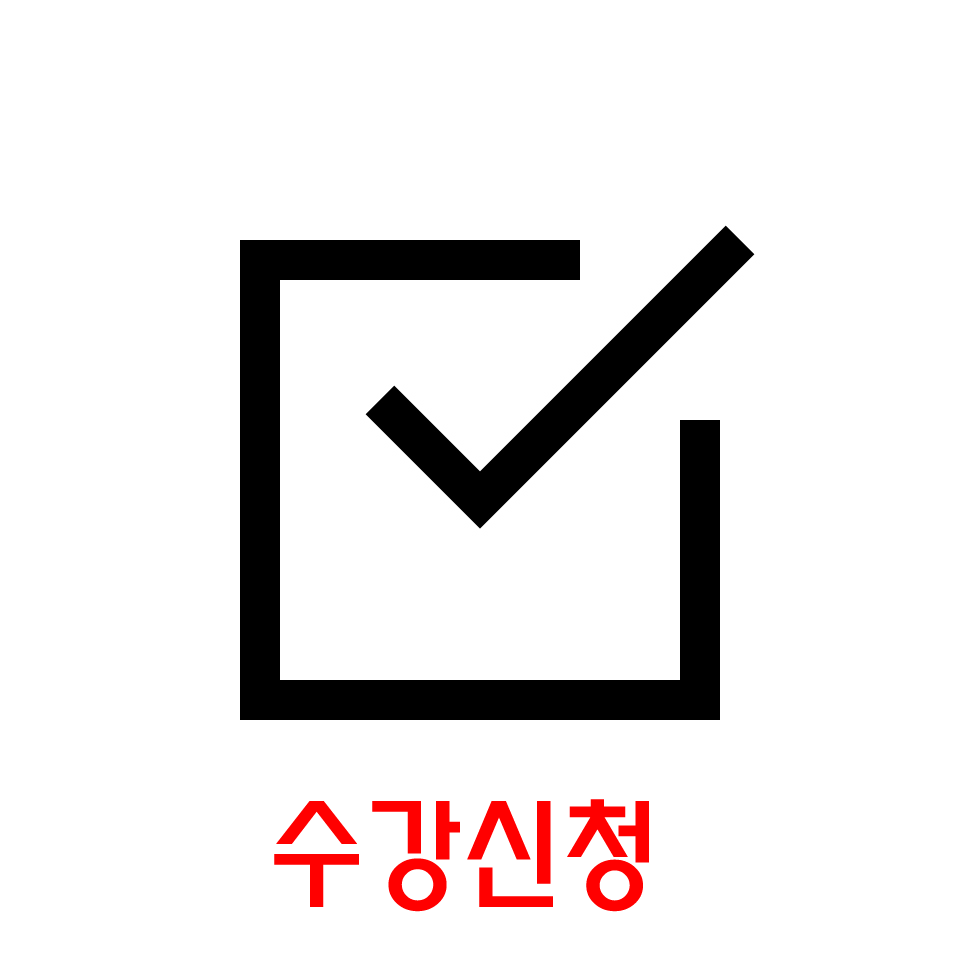
<style>
.page{position:relative;width:960px;height:960px;background:#ffffff}
.page>*{position:absolute;margin:0}
.t1{font:120px "MoeumTR-HM";color:#ff0000}
</style>
<div class="page">
<p class="t1" style="left:274px;top:799px;width:375px;height:113px">수강신청</p>
</div>
